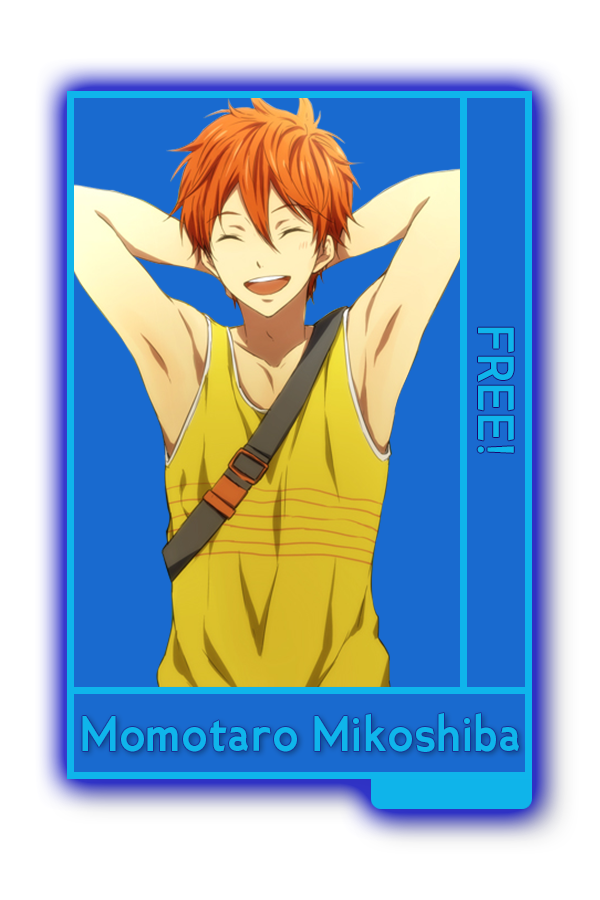
<style>
.page{position:relative;width:600px;height:900px;background:#196acf}
.page>*{position:absolute;margin:0}
.t1{font:47.8px "Ancillary-Bold";color:#0fb5eb}
.t2{font:46.7px "Ancillary-Bold";color:#0fb5eb}
</style>
<div class="page">
<p class="t1" style="left:477px;top:327px;width:37px;height:126px;rotate:90deg">FREE!</p>
<p class="t2" style="left:82px;top:713px;width:437px;height:39px">Momotaro Mikoshiba</p>
</div>
